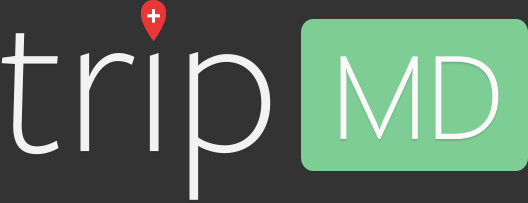
<style>
.page{position:relative;width:528px;height:203px;background:#333333}
.page>*{position:absolute;margin:0}
.t1{font:30.4px "FreightSansProSemibold-Italic";color:#ffffff}
.t2{font:209.2px "FreightSansProLight-Regular";color:#f3f3f3}
.t3{font:117.7px "SegoeUI-Light";color:#fafafa}
</style>
<div class="page">
<p class="t1" style="left:147px;top:9px;width:13px;height:14px">+</p>
<p class="t2" style="left:1px;top:19px;width:270px;height:181px">trip</p>
<p class="t3" style="left:340px;top:56px;width:159px;height:83px">MD</p>
</div>
